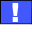
<style>
.page{position:relative;width:32px;height:32px;background:#4258fd}
.page>*{position:absolute;margin:0}
.t1{font:25.6px "Arial-Black";color:#ffffff}
</style>
<div class="page">
<p class="t1" style="left:12px;top:3px;width:7px;height:19px">!</p>
</div>
